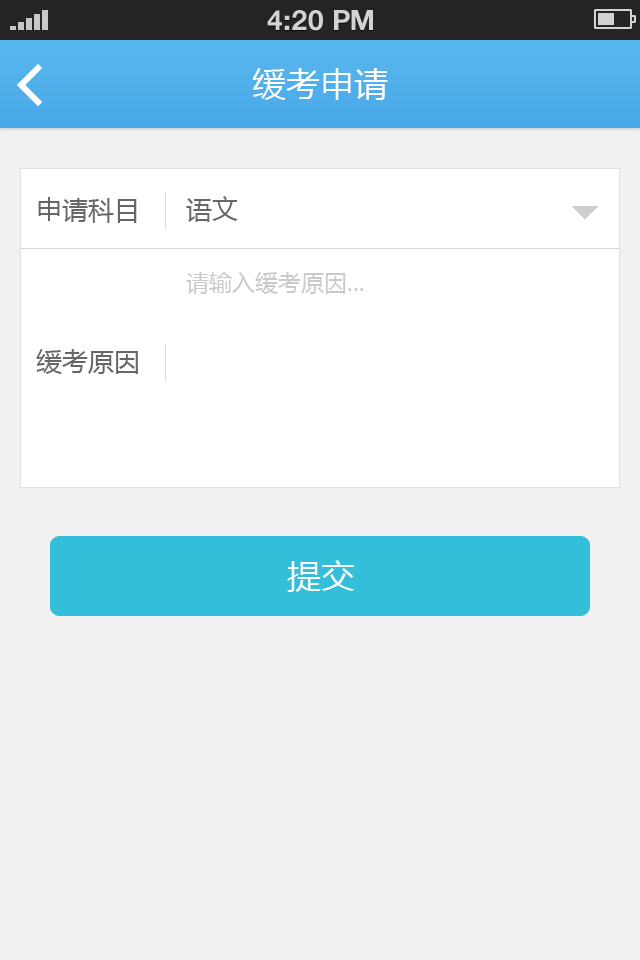
<style>
.page{position:relative;width:640px;height:960px;background:#f1f1f1}
.page>*{position:absolute;margin:0}
.t1{font:28px "HelveticaNeueLTStd-Bd";color:#d3d3d3;text-transform:uppercase}
.t2{font:34px "MicrosoftYaHei";color:#ffffff}
.t3{font:26px "MicrosoftYaHei";color:#676767}
.t4{font:23px "MicrosoftYaHei";color:#cbcaca}
</style>
<div class="page">
<p class="t1" style="left:267px;top:10px;width:106px;height:21px">4:20 PM</p>
<p class="t2" style="left:252px;top:68px;width:136px;height:32px">缓考申请</p>
<p class="t3" style="left:38px;top:197px;width:99px;height:26px">申请科目</p>
<p class="t3" style="left:186px;top:196px;width:52px;height:26px">语文</p>
<p class="t4" style="left:186px;top:272px;width:178px;height:22px">请输入缓考原因...</p>
<p class="t3" style="left:36px;top:349px;width:102px;height:25px">缓考原因</p>
<p class="t2" style="left:287px;top:560px;width:68px;height:32px">提交</p>
</div>
